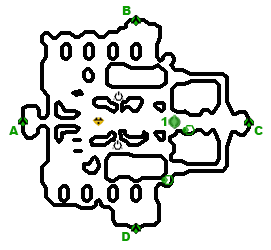
<style>
.page{position:relative;width:271px;height:250px;background:#ffffff}
.page>*{position:absolute;margin:0}
.t1{font:12px "Arial-Black";color:#0d9e01}
</style>
<div class="page">
<p class="t1" style="left:122px;top:6px;width:9px;height:9px">B</p>
<p class="t1" style="left:9px;top:126px;width:10px;height:9px">A</p>
<p class="t1" style="left:161px;top:117px;width:6px;height:9px">1</p>
<p class="t1" style="left:254px;top:126px;width:9px;height:9px">C</p>
<p class="t1" style="left:122px;top:232px;width:8px;height:9px">D</p>
</div>
